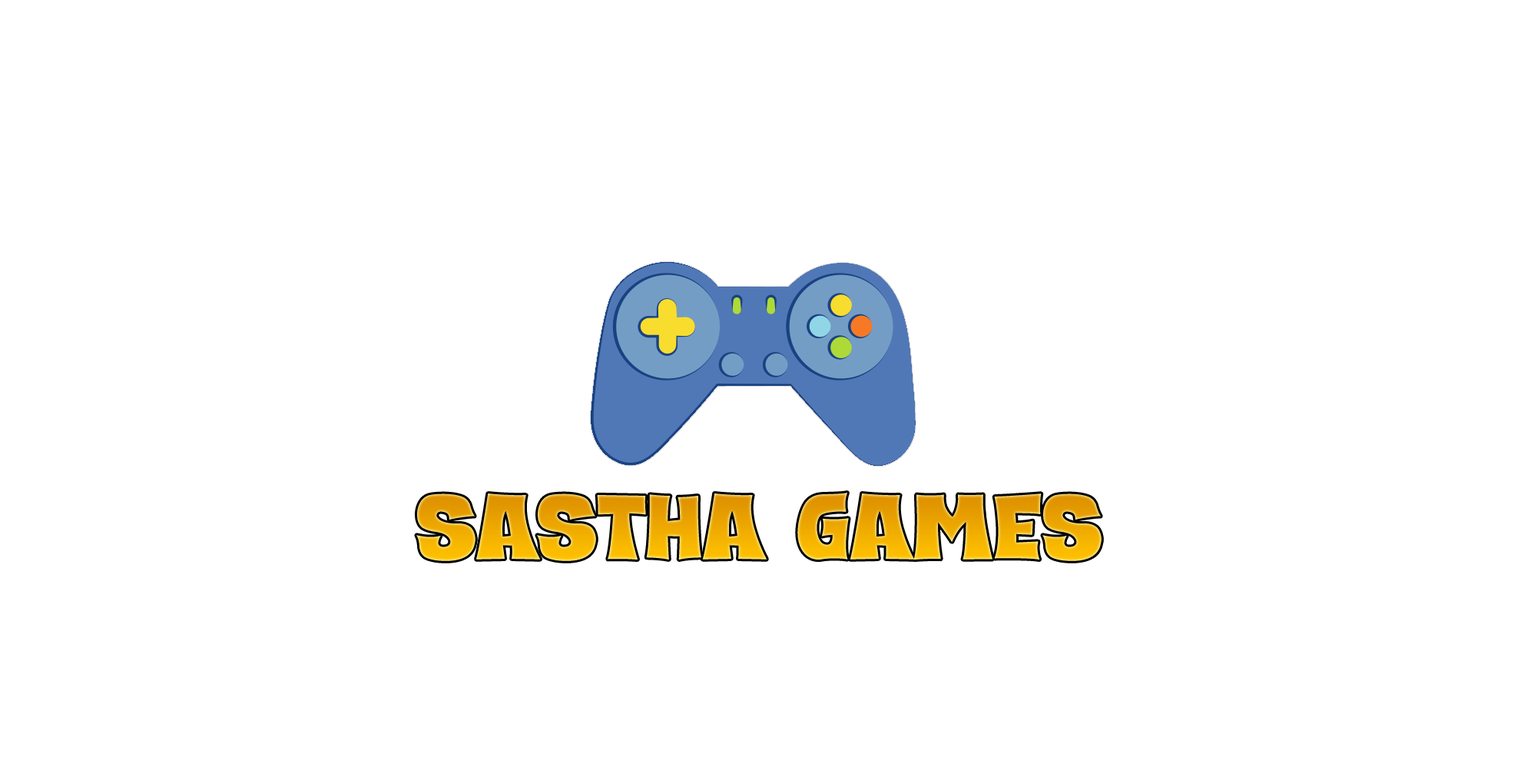
<style>
.page{position:relative;width:1521px;height:784px;background:#ffffff}
.page>*{position:absolute;margin:0}
.t1{font:93.7px "SCARYAndSPICYRegular";scale:1.11 1}
</style>
<div class="page">
<p class="t1" style="left:416px;top:493px;width:686px;height:68px">SaSTHA GAMES</p>
</div>
